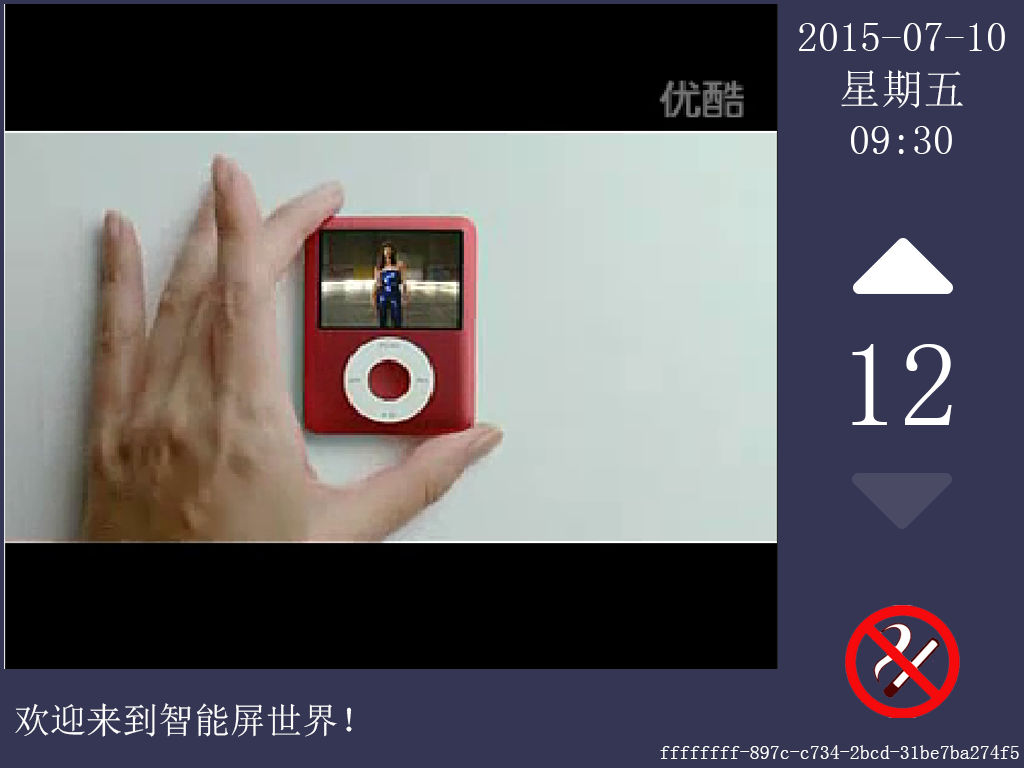
<style>
.page{position:relative;width:1024px;height:768px;background:#353654}
.page>*{position:absolute;margin:0}
.t1{font:42px "SimSun";color:#ffffff}
.t2{font:120px "SimSun";color:#ffffff}
.t3{font:36px "SimSun";color:#ffffff}
.t4{font:20px "SimSun";color:#ffffff}
</style>
<div class="page">
<p class="t1" style="left:799px;top:23px;width:206px;height:28px">2015-07-10</p>
<p class="t1" style="left:841px;top:70px;width:122px;height:38px">星期五</p>
<p class="t1" style="left:851px;top:126px;width:101px;height:28px">09:30</p>
<p class="t2" style="left:852px;top:344px;width:100px;height:81px">12</p>
<p class="t3" style="left:15px;top:703px;width:337px;height:34px">欢迎来到智能屏世界！</p>
<p class="t4" style="left:660px;top:745px;width:359px;height:14px">ffffffff-897c-c734-2bcd-31be7ba274f5</p>
</div>
